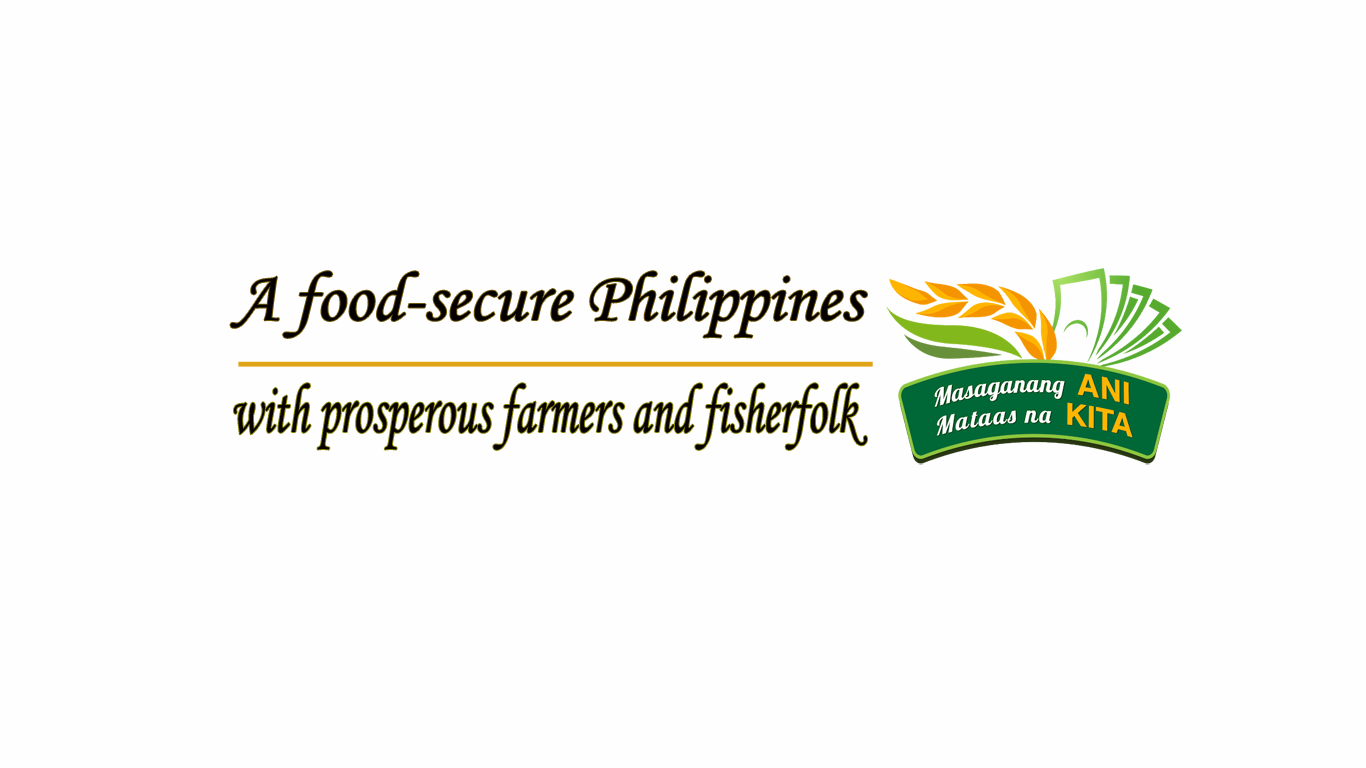
<style>
.page{position:relative;width:1366px;height:768px;background:#fefefe}
.page>*{position:absolute;margin:0}
.t1{font:70.3px "MonotypeCorsiva";color:#060101}
.t2{font:70.3px "MonotypeCorsiva";color:#080202;scale:0.66 1}
</style>
<div class="page">
<p class="t1" style="left:230px;top:271px;width:637px;height:67px">A food-secure Philippines</p>
<p class="t2" style="left:234px;top:383px;width:633px;height:67px">with prosperous farmers and fisherfolk</p>
</div>
